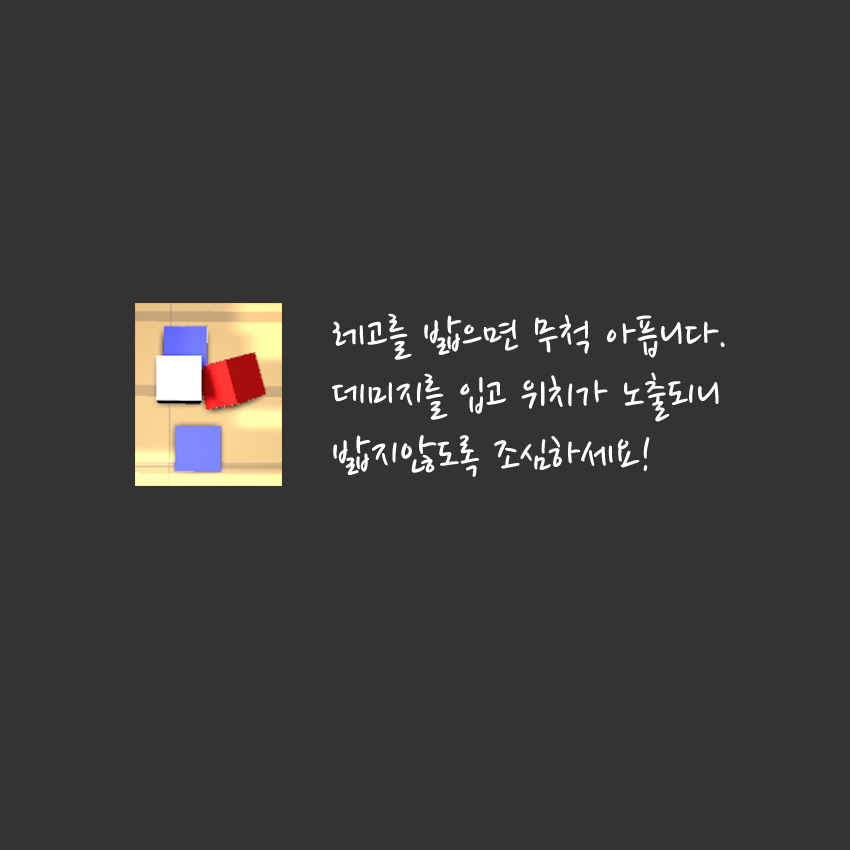
<style>
.page{position:relative;width:850px;height:850px;background:#333333}
.page>*{position:absolute;margin:0}
.t1{font:50px "NanumPen";color:#ffffff}
</style>
<div class="page">
<p class="t1" style="left:332px;top:313px;width:393px;height:164px">레고를 밟으면 무척 아픕니다.<br>데미지를 입고 위치가 노출되니<br>밟지않도록 조심하세요!</p>
</div>
